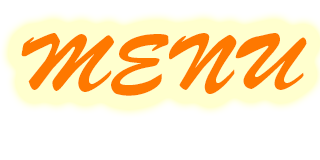
<style>
.page{position:relative;width:320px;height:160px;background:#ffffff}
.page>*{position:absolute;margin:0}
.t1{font:80px "BrushScriptStd";color:#fe7800}
</style>
<div class="page">
<p class="t1" style="left:21px;top:33px;width:286px;height:63px">MENU</p>
</div>
